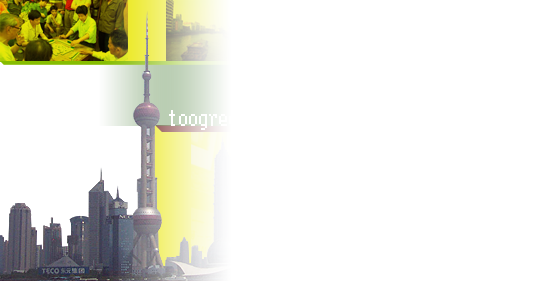
<style>
.page{position:relative;width:550px;height:281px;background:#ffffff}
.page>*{position:absolute;margin:0}
.t1{font:30px "Terminal";color:#ffffff}
</style>
<div class="page">
<p class="t1" style="left:169px;top:110px;width:78px;height:20px">toogreen</p>
</div>
